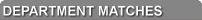
<style>
.page{position:relative;width:202px;height:20px;background:#858585}
.page>*{position:absolute;margin:0}
.t1{font:13.3px "Arial-BoldMT";color:#ffffff}
</style>
<div class="page">
<p class="t1" style="left:3px;top:5px;width:159px;height:11px">DEPARTMENT MATCHES</p>
</div>
